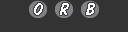
<style>
.page{position:relative;width:128px;height:32px;background:#333333}
.page>*{position:absolute;margin:0}
.t1{font:18px "DomDiagonalBT-Regular";letter-spacing:0.075em;color:#ffffff}
</style>
<div class="page">
<p class="t1" style="left:34px;top:3px;width:9px;height:12px">O</p>
<p class="t1" style="left:60px;top:3px;width:9px;height:12px">R</p>
<p class="t1" style="left:86px;top:3px;width:9px;height:12px">B</p>
</div>
